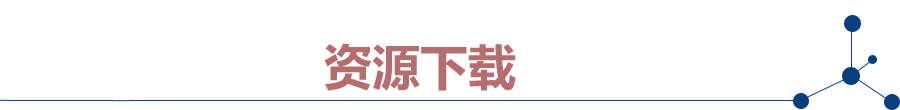
<style>
.page{position:relative;width:900px;height:110px;background:#ffffff}
.page>*{position:absolute;margin:0}
.t1{font:48px "MicrosoftYaHei-Bold";color:#b66d6d}
</style>
<div class="page">
<p class="t1" style="left:324px;top:43px;width:192px;height:48px">资源下载</p>
</div>
